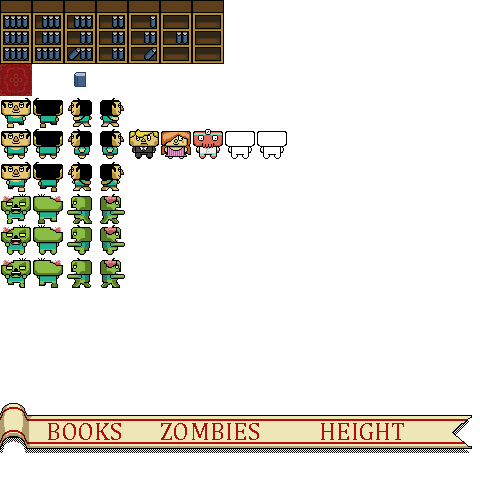
<style>
.page{position:relative;width:480px;height:480px;background:#ffffff}
.page>*{position:absolute;margin:0}
.t1{font:25px "Cambria";color:#b40c0c}
</style>
<div class="page">
<p class="t1" style="left:48px;top:423px;width:73px;height:17px">BOOKS</p>
<p class="t1" style="left:161px;top:423px;width:98px;height:17px">ZOMBIES</p>
<p class="t1" style="left:321px;top:423px;width:83px;height:17px">HEIGHT</p>
</div>
